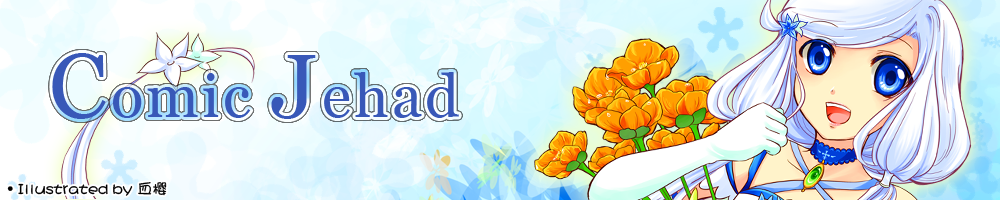
<style>
.page{position:relative;width:1000px;height:200px}
.page>*{position:absolute;margin:0}
.t1{font:60px "Vani";letter-spacing:0.05em;color:#3858b8}
.t2{font:90px "Vani";letter-spacing:0.05em;color:#3858b8}
.t3{font:15px "DFPShaoNvW5";color:#010000}
</style>
<div class="page">
<p class="t1" style="left:52px;top:53px;width:407px;height:66px"><span class="t2">C</span>omic <span class="t2">J</span>ehad</p>
<p class="t3" style="left:7px;top:182px;width:160px;height:14px">·Illustrated by 血樱</p>
</div>
